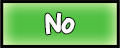
<style>
.page{position:relative;width:120px;height:48px}
.page>*{position:absolute;margin:0}
.t1{font:32px "Animated";color:#ffffff}
</style>
<div class="page">
<p class="t1" style="left:45px;top:12px;width:30px;height:23px">No</p>
</div>
